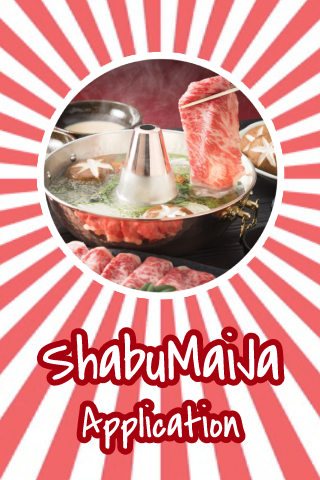
<style>
.page{position:relative;width:320px;height:480px}
.page>*{position:absolute;margin:0}
.t1{font:42.8px "CoveredByYourGrace";color:#ffffff}
.t2{font:61.8px "CoveredByYourGrace";color:#ffffff}
</style>
<div class="page">
<p class="t1" style="left:43px;top:332px;width:236px;height:117px;text-align:center"><span class="t2">ShabuMaiJa<br></span>Application</p>
</div>
